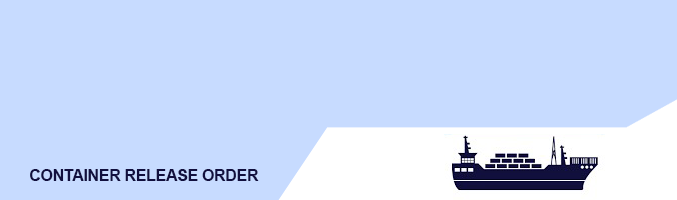
<style>
.page{position:relative;width:677px;height:200px;background:#c7dbff}
.page>*{position:absolute;margin:0}
.t1{font:16px "Arial-BoldMT";letter-spacing:-0.02em;color:#110f3e}
</style>
<div class="page">
<p class="t1" style="left:30px;top:169px;width:229px;height:12px">CONTAINER RELEASE ORDER</p>
</div>
